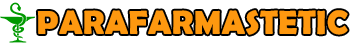
<style>
.page{position:relative;width:350px;height:45px;background:#ffffff}
.page>*{position:absolute;margin:0}
.t1{font:33px "BerlinSansFBDemi-Bold";color:#fe980f;font-weight:bold}
</style>
<div class="page">
<p class="t1" style="left:37px;top:10px;width:311px;height:25px">PARAFARMASTETIC</p>
</div>
